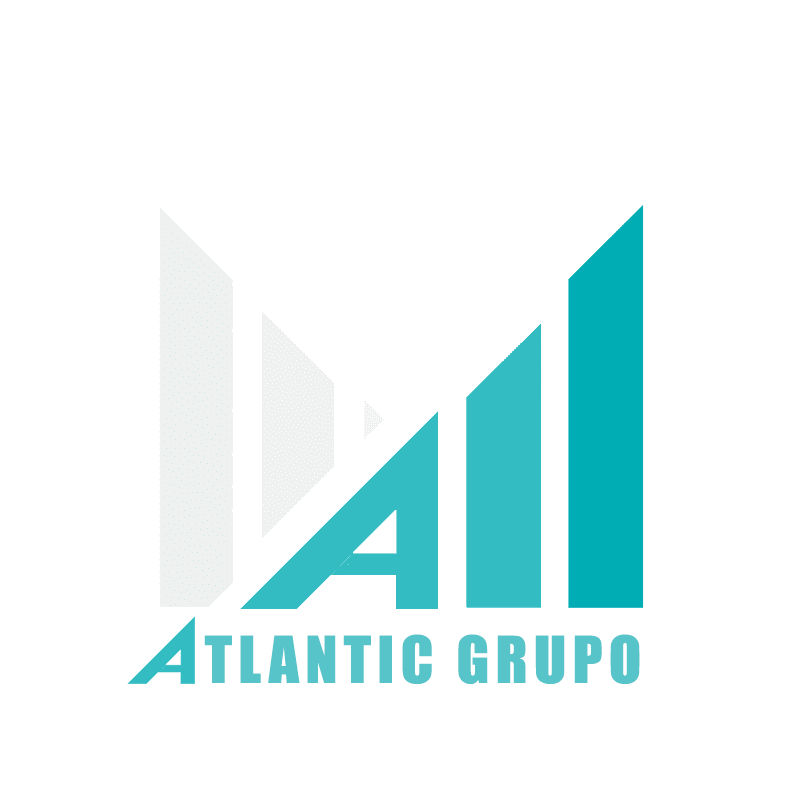
<style>
.page{position:relative;width:800px;height:800px;background:#ffffff}
.page>*{position:absolute;margin:0}
.t1{font:60px "Impact";letter-spacing:0.1em;color:#57c4c9}
</style>
<div class="page">
<p class="t1" style="left:204px;top:634px;width:436px;height:50px">TLANTIC GRUPO</p>
</div>
